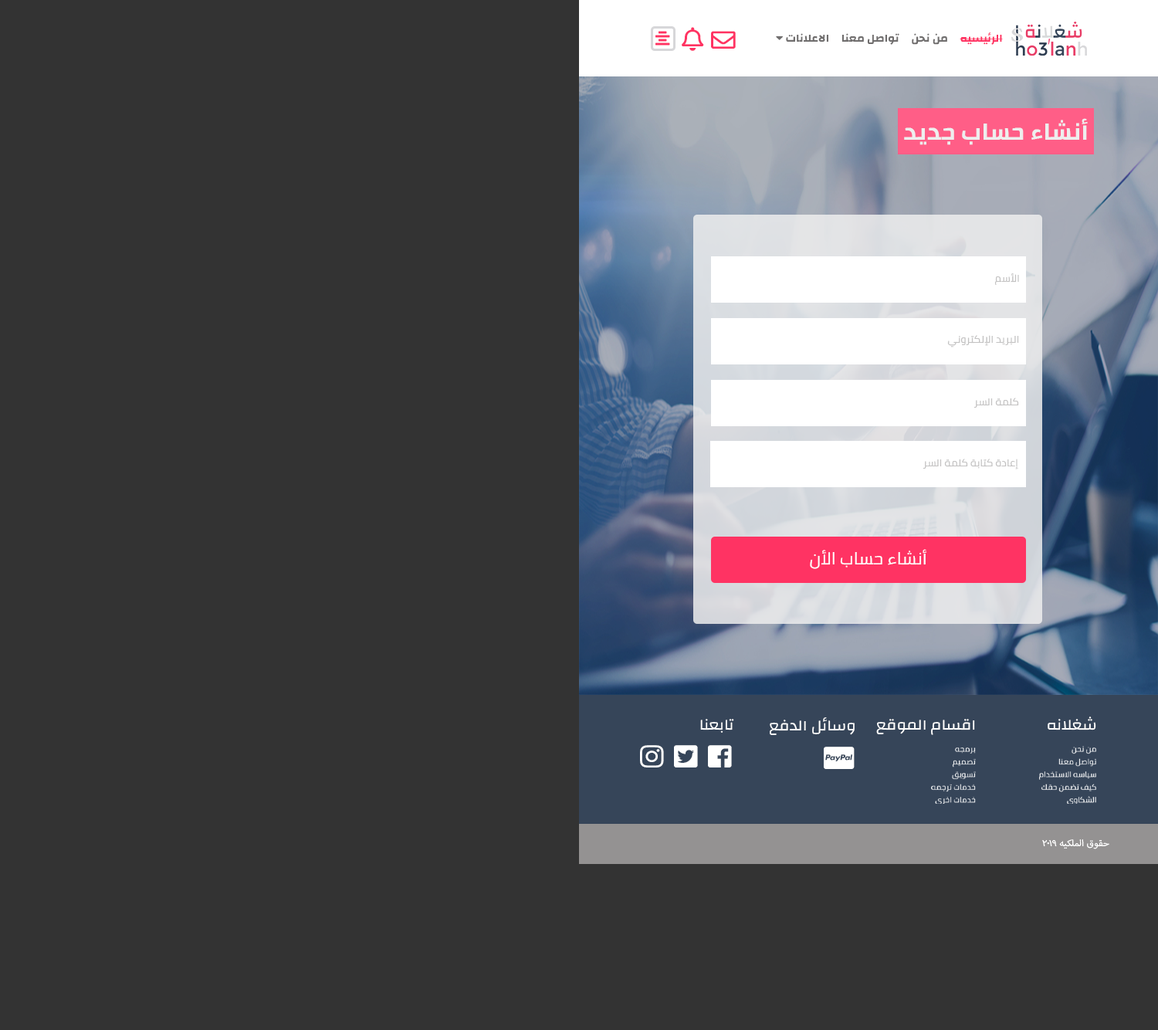
<style>
.page{position:relative;width:1158px;height:1030px;background:#333333}
.page>*{position:absolute;margin:0}
.t1{font:23.2px "Cairo-Bold";color:#eeeeee;text-transform:uppercase;scale:1.06 1}
.t2{font:10px "Cairo";color:#c3c2c2;text-transform:uppercase;scale:1.06 1}
.t3{font:17px "Cairo";color:#ffffff;text-transform:uppercase;scale:1.06 1}
.t4{font:15.2px "Changa-Regular";color:#ffffff;text-transform:uppercase;scale:1.06 1}
.t5{font:7.6px/12.7px "Cairo-Regular";color:#ffffff;text-transform:uppercase;scale:1.06 1}
.t6{font:12.7px "MyriadArabic-Regular";color:#ffffff;text-transform:uppercase;scale:1.06 1}
</style>
<div class="page">
<p class="t1" style="left:904px;top:118px;width:184px;height:27px">أنشاء حساب جديد</p>
<p class="t2" style="left:994px;top:273px;width:25px;height:12px">الأسم</p>
<p class="t2" style="left:947px;top:335px;width:72px;height:12px">البريد الإلكتروني</p>
<p class="t2" style="left:973px;top:398px;width:46px;height:10px">كلمة السر</p>
<p class="t2" style="left:922px;top:459px;width:96px;height:10px">إعادة كتابة كلمة السر</p>
<p class="t3" style="left:810px;top:549px;width:117px;height:20px">أنشاء حساب الأن</p>
<p class="t4" style="left:700px;top:719px;width:34px;height:14px">تابعنا</p>
<p class="t4" style="left:770px;top:717px;width:85px;height:18px">وسائل الدفع</p>
<p class="t4" style="left:876px;top:719px;width:99px;height:16px">اقسام الموقع</p>
<p class="t4" style="left:1048px;top:716px;width:48px;height:14px">شغلانه</p>
<p class="t5" style="left:931px;top:747px;width:45px;height:57px">برمجه <br>تصميم<br>تسويق <br>خدمات ترجمه<br>خدمات اخرى</p>
<p class="t5" style="left:1039px;top:746px;width:57px;height:58px">من نحن<br>تواصل معنا<br>سياسه الاستخدام <br>كيف تضمن حقك<br>الشكاوى</p>
<p class="t6" style="left:1042px;top:839px;width:67px;height:10px">حقوق الملكيه 2019</p>
</div>
